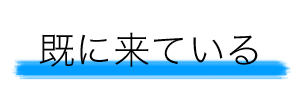
<style>
.page{position:relative;width:300px;height:100px;background:#ffffff}
.page>*{position:absolute;margin:0}
.t1{font:37.5px "HiraginoSans-W2";color:#010101}
</style>
<div class="page">
<p class="t1" style="left:39px;top:32px;width:219px;height:35px">既に来ている</p>
</div>
